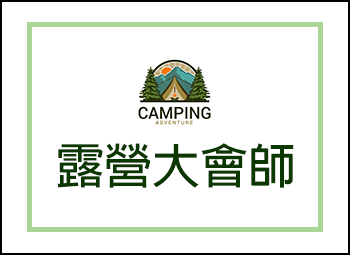
<style>
.page{position:relative;width:350px;height:255px;background:#ffffff}
.page>*{position:absolute;margin:0}
.t1{font:48px "AdobeFanHeitiStd-Bold";color:#0b3700}
</style>
<div class="page">
<p class="t1" style="left:57px;top:143px;width:237px;height:45px">露營大會師</p>
</div>
